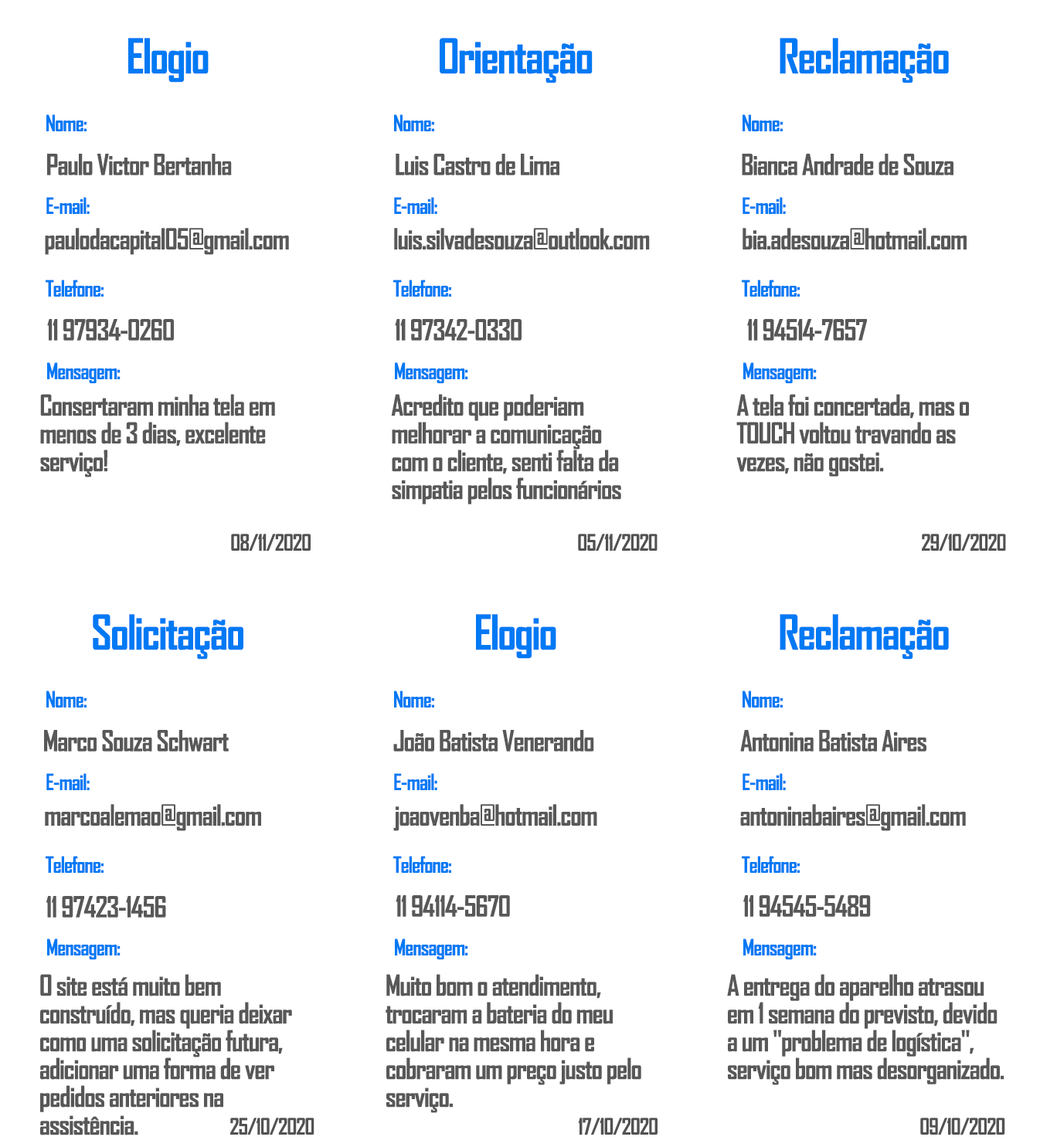
<style>
.page{position:relative;width:1040px;height:1147px;background:#ffffff}
.page>*{position:absolute;margin:0}
.t1{font:46.3px "AgencyFB-Bold";letter-spacing:-0.04em;color:#0079f4}
.t2{font:21.6px "AgencyFB-Bold";letter-spacing:-0.04em;color:#0079f4}
.t3{font:27.8px "AgencyFB-Bold";letter-spacing:-0.04em;color:#585858}
.t4{font:27.8px/27.8px "AgencyFB-Bold";letter-spacing:-0.04em;color:#585858}
.t5{font:21.6px "AgencyFB-Bold";letter-spacing:-0.04em;color:#525252}
</style>
<div class="page">
<p class="t1" style="left:128px;top:38px;width:81px;height:45px">Elogio</p>
<p class="t1" style="left:439px;top:38px;width:153px;height:45px">Orientação</p>
<p class="t1" style="left:779px;top:38px;width:169px;height:45px">Reclamação</p>
<p class="t2" style="left:46px;top:114px;width:41px;height:17px">Nome:</p>
<p class="t2" style="left:394px;top:114px;width:40px;height:17px">Nome:</p>
<p class="t2" style="left:742px;top:114px;width:40px;height:17px">Nome:</p>
<p class="t3" style="left:47px;top:154px;width:185px;height:21px">Paulo Victor Bertanha</p>
<p class="t3" style="left:395px;top:154px;width:164px;height:21px">Luis Castro de Lima</p>
<p class="t3" style="left:741px;top:154px;width:212px;height:21px">Bianca Andrade de Souza</p>
<p class="t2" style="left:46px;top:197px;width:44px;height:18px">E-mail:</p>
<p class="t2" style="left:394px;top:197px;width:43px;height:18px">E-mail:</p>
<p class="t2" style="left:742px;top:197px;width:44px;height:18px">E-mail:</p>
<p class="t3" style="left:45px;top:228px;width:244px;height:27px">paulodacapital05@gmail.com</p>
<p class="t3" style="left:394px;top:228px;width:256px;height:21px">luis.silvadesouza@outlook.com</p>
<p class="t3" style="left:742px;top:228px;width:224px;height:21px">bia.adesouza@hotmail.com</p>
<p class="t2" style="left:46px;top:280px;width:57px;height:17px">Telefone:</p>
<p class="t2" style="left:393px;top:280px;width:58px;height:17px">Telefone:</p>
<p class="t2" style="left:741px;top:280px;width:58px;height:17px">Telefone:</p>
<p class="t3" style="left:47px;top:319px;width:127px;height:22px">11 97934-0260</p>
<p class="t3" style="left:395px;top:319px;width:126px;height:22px">11 97342-0330</p>
<p class="t3" style="left:747px;top:319px;width:120px;height:22px">11 94514-7657</p>
<p class="t2" style="left:47px;top:362px;width:73px;height:22px">Mensagem:</p>
<p class="t2" style="left:395px;top:362px;width:73px;height:22px">Mensagem:</p>
<p class="t2" style="left:743px;top:362px;width:73px;height:22px">Mensagem:</p>
<p class="t4" style="left:40px;top:394px;width:235px;height:83px">Consertaram minha tela em <br> menos de 3 dias, excelente <br> serviço!</p>
<p class="t4" style="left:391px;top:394px;width:230px;height:110px">Acredito que poderiam <br> melhorar a comunicação <br> com o cliente, senti falta da <br> simpatia pelos funcionários</p>
<p class="t4" style="left:736px;top:394px;width:233px;height:83px">A tela foi concertada, mas o <br> TOUCH voltou travando as <br> vezes, não gostei.</p>
<p class="t5" style="left:231px;top:534px;width:79px;height:17px">08/11/2020</p>
<p class="t5" style="left:578px;top:534px;width:79px;height:17px">05/11/2020</p>
<p class="t5" style="left:921px;top:534px;width:85px;height:17px">29/10/2020</p>
<p class="t1" style="left:93px;top:614px;width:150px;height:46px">Solicitação</p>
<p class="t1" style="left:476px;top:614px;width:80px;height:45px">Elogio</p>
<p class="t1" style="left:779px;top:614px;width:169px;height:46px">Reclamação</p>
<p class="t2" style="left:46px;top:691px;width:41px;height:17px">Nome:</p>
<p class="t2" style="left:394px;top:691px;width:40px;height:17px">Nome:</p>
<p class="t2" style="left:742px;top:691px;width:40px;height:17px">Nome:</p>
<p class="t3" style="left:44px;top:730px;width:185px;height:22px">Marco Souza Schwart</p>
<p class="t3" style="left:393px;top:730px;width:201px;height:22px">João Batista Venerando</p>
<p class="t3" style="left:740px;top:730px;width:186px;height:22px">Antonina Batista Aires</p>
<p class="t2" style="left:46px;top:773px;width:44px;height:18px">E-mail:</p>
<p class="t2" style="left:394px;top:773px;width:43px;height:18px">E-mail:</p>
<p class="t2" style="left:742px;top:773px;width:44px;height:18px">E-mail:</p>
<p class="t3" style="left:45px;top:804px;width:216px;height:27px">marcoalemao@gmail.com</p>
<p class="t3" style="left:393px;top:804px;width:204px;height:27px">joaovenba@hotmail.com</p>
<p class="t3" style="left:740px;top:804px;width:225px;height:27px">antoninabaires@gmail.com</p>
<p class="t2" style="left:46px;top:856px;width:57px;height:17px">Telefone:</p>
<p class="t2" style="left:393px;top:856px;width:58px;height:17px">Telefone:</p>
<p class="t2" style="left:741px;top:856px;width:58px;height:17px">Telefone:</p>
<p class="t3" style="left:46px;top:896px;width:120px;height:22px">11 97423-1456</p>
<p class="t3" style="left:395px;top:895px;width:115px;height:22px">11 94114-5670</p>
<p class="t3" style="left:743px;top:895px;width:127px;height:22px">11 94545-5489</p>
<p class="t2" style="left:47px;top:938px;width:73px;height:22px">Mensagem:</p>
<p class="t2" style="left:395px;top:938px;width:73px;height:22px">Mensagem:</p>
<p class="t2" style="left:743px;top:938px;width:73px;height:22px">Mensagem:</p>
<p class="t4" style="left:40px;top:974px;width:252px;height:161px">O site está muito bem <br>construído, mas queria deixar <br>como uma solicitação futura,<br>adicionar uma forma de ver <br>pedidos anteriores na <br>assistência.</p>
<p class="t4" style="left:385px;top:974px;width:256px;height:139px">Muito bom o atendimento, <br>trocaram a bateria do meu <br>celular na mesma hora e <br>cobraram um preço justo pelo <br>serviço.</p>
<p class="t4" style="left:727px;top:974px;width:277px;height:111px">A entrega do aparelho atrasou <br>em 1 semana do previsto, devido <br>a um "problema de logística", <br>serviço bom mas desorganizado.</p>
<p class="t5" style="left:230px;top:1118px;width:84px;height:17px">25/10/2020</p>
<p class="t5" style="left:578px;top:1118px;width:79px;height:17px">17/10/2020</p>
<p class="t5" style="left:920px;top:1118px;width:85px;height:17px">09/10/2020</p>
</div>
